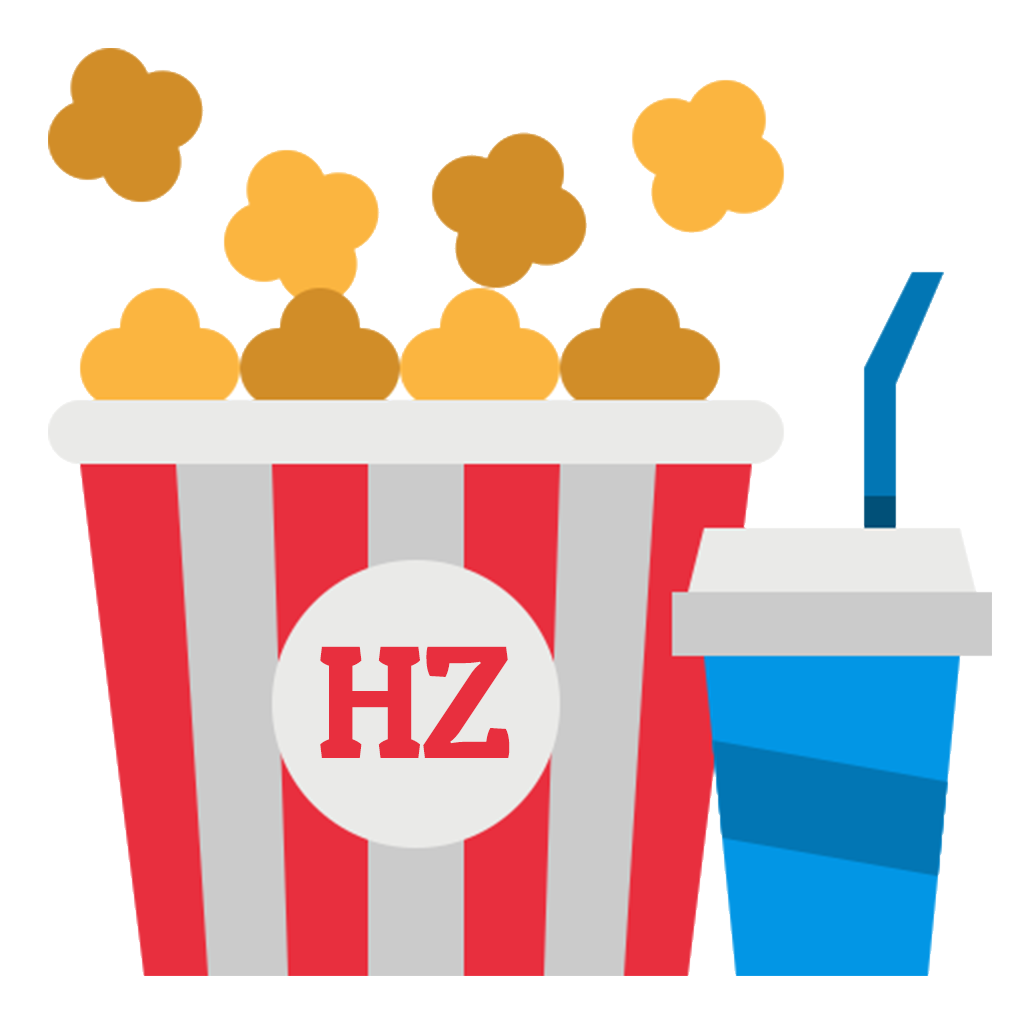
<style>
.page{position:relative;width:1024px;height:1024px;background:#ffffff}
.page>*{position:absolute;margin:0}
.t1{font:161px "PatuaOne-Regular";letter-spacing:-0.025em;color:#e82f3e}
</style>
<div class="page">
<p class="t1" style="left:320px;top:646px;width:190px;height:112px">HZ</p>
</div>
